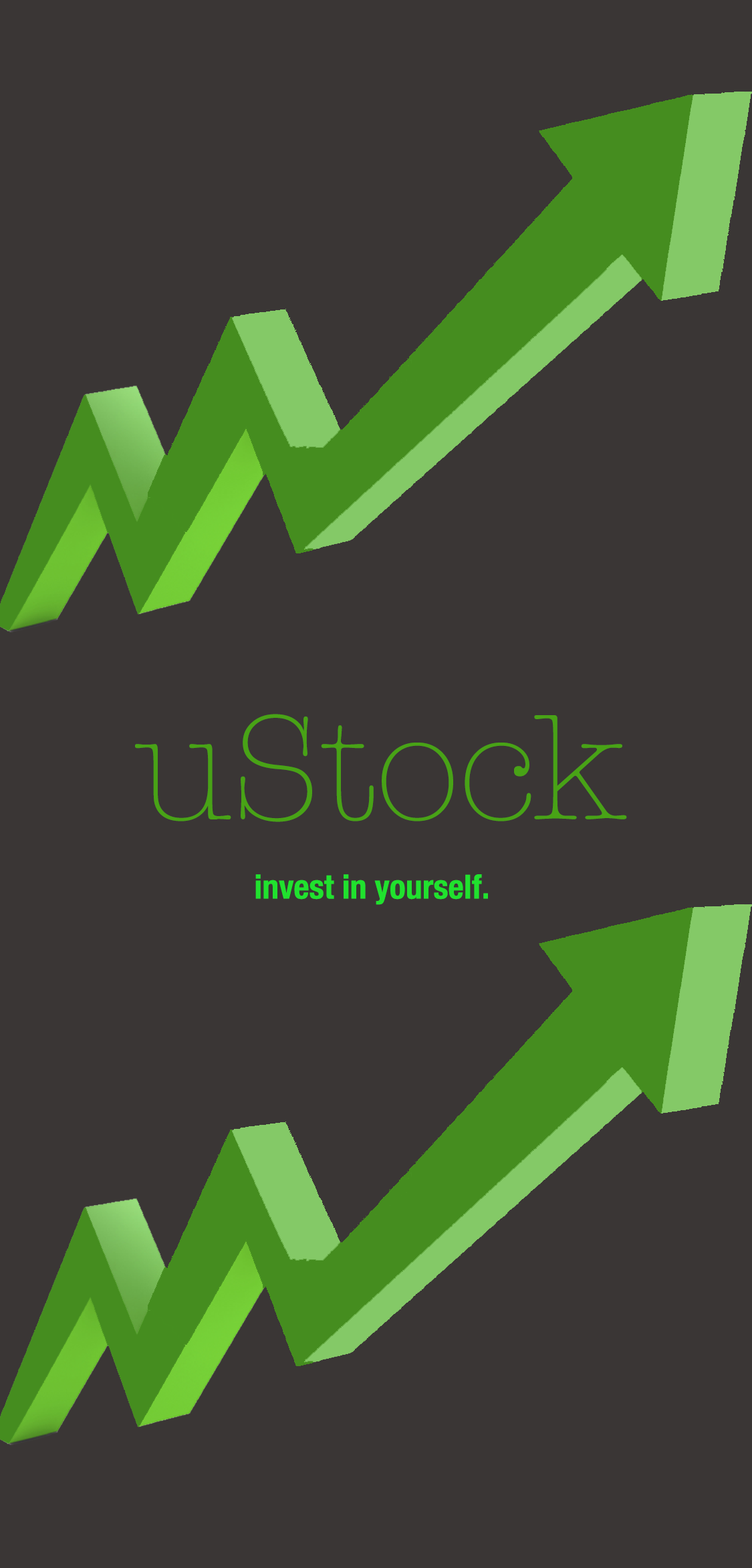
<style>
.page{position:relative;width:752px;height:1568px;background:#3a3635}
.page>*{position:absolute;margin:0}
.t1{font:152.3px "AmericanTypewriter-Light";color:#48a316}
.t2{font:33.4px "HelveticaNeue-CondensedBold";color:#20e22e}
</style>
<div class="page">
<p class="t1" style="left:135px;top:714px;width:492px;height:108px">uStock</p>
<p class="t2" style="left:255px;top:874px;width:233px;height:31px">invest in yourself.</p>
</div>
